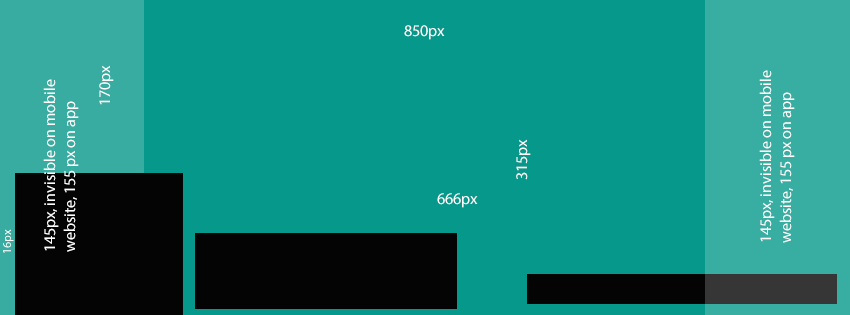
<style>
.page{position:relative;width:850px;height:315px;background:#06988a}
.page>*{position:absolute;margin:0}
.t1{font:16px "MyriadPro-Regular";color:#ffffff}
.t2{font:16px/19.2px "MyriadPro-Regular";color:#ffffff}
.t3{font:12px "MyriadPro-Regular";color:#ffffff}
</style>
<div class="page">
<p class="t1" style="left:404px;top:25px;width:41px;height:15px">850px</p>
<p class="t1" style="left:99px;top:65px;width:15px;height:40px;rotate:-90deg">170px</p>
<p class="t2" style="left:759px;top:70px;width:36px;height:173px;rotate:-90deg">145px, invisible on mobile<br>website, 155 px on app</p>
<p class="t2" style="left:43px;top:79px;width:36px;height:173px;rotate:-90deg">145px, invisible on mobile<br>website, 155 px on app</p>
<p class="t1" style="left:516px;top:139px;width:15px;height:41px;rotate:-90deg">315px</p>
<p class="t1" style="left:437px;top:193px;width:41px;height:15px">666px</p>
<p class="t3" style="left:3px;top:229px;width:11px;height:24px;rotate:-90deg">16px</p>
</div>
